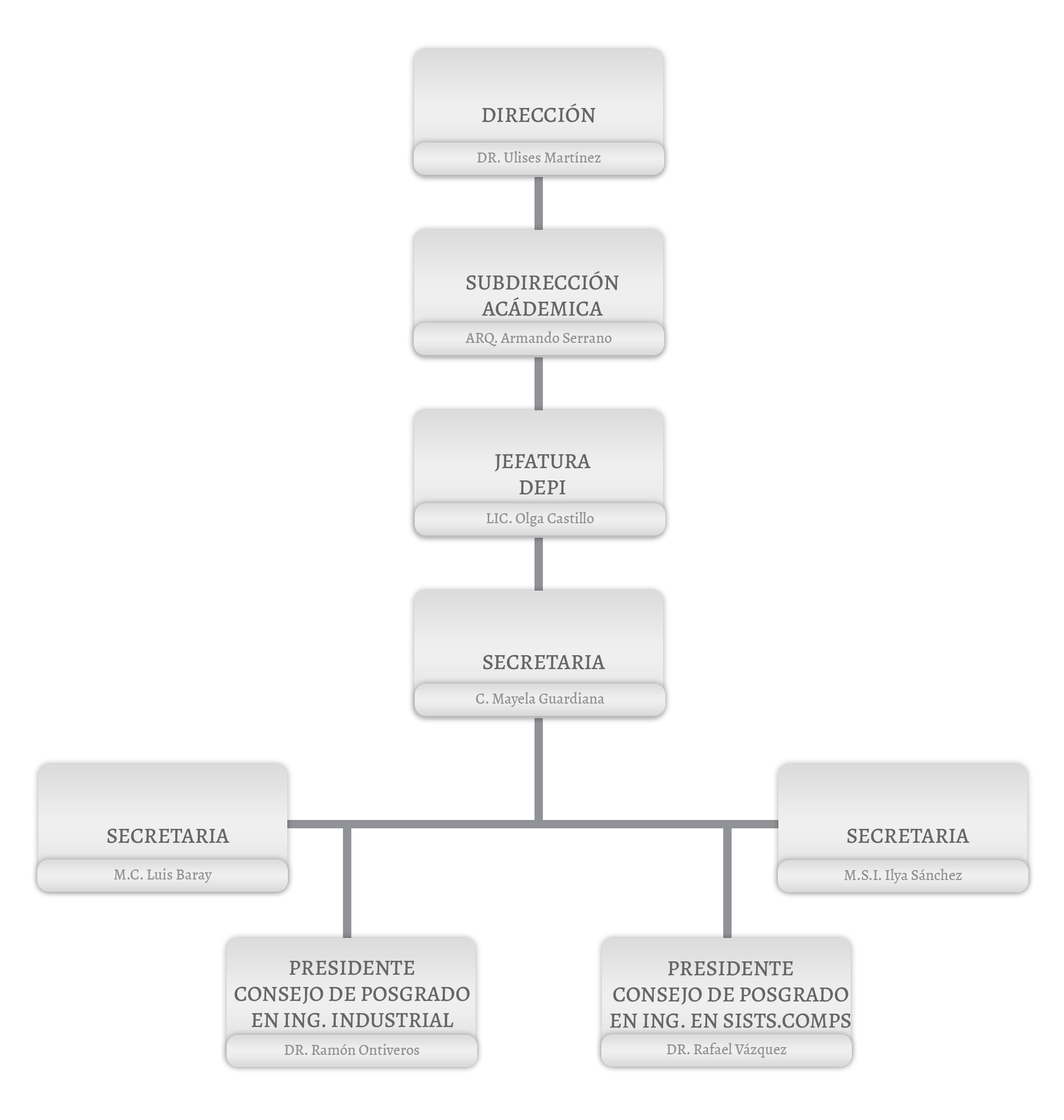
<style>
.page{position:relative;width:1064px;height:1120px;background:#ffffff}
.page>*{position:absolute;margin:0}
.t1{font:15.1px "Alegreya-Medium";color:#909295}
.t2{font:21.8px "Alegreya-Medium";color:#666666}
</style>
<div class="page">
<p class="t1" style="left:477px;top:151px;width:124px;height:12px">DR. Ulises Martínez</p>
<p class="t1" style="left:466px;top:331px;width:146px;height:15px">ARQ. Armando Serrano</p>
<p class="t1" style="left:487px;top:512px;width:107px;height:15px">LIC. Olga Castillo</p>
<p class="t1" style="left:476px;top:692px;width:129px;height:15px">C. Mayela Guardiana</p>
<p class="t1" style="left:114px;top:869px;width:98px;height:14px">M.C. Luis Baray</p>
<p class="t1" style="left:844px;top:869px;width:118px;height:15px">M.S.I. Ilya Sánchez</p>
<p class="t2" style="left:234px;top:961px;width:236px;height:68px;text-align:center">PRESIDENTE<br>CONSEJO DE POSGRADO<br>EN ING. INDUSTRIAL</p>
<p class="t2" style="left:610px;top:961px;width:241px;height:68px;text-align:center">PRESIDENTE<br>CONSEJO DE POSGRADO<br>EN ING. EN SISTS.COMPS</p>
<p class="t1" style="left:285px;top:1044px;width:134px;height:12px">DR. Ramón Ontiveros</p>
<p class="t1" style="left:667px;top:1043px;width:120px;height:15px">DR. Rafael Vázquez</p>
</div>
